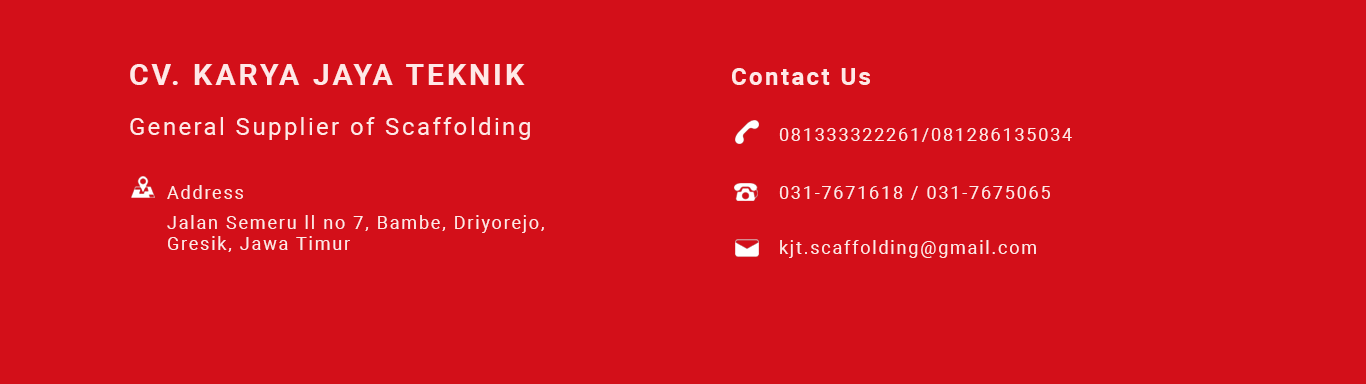
<style>
.page{position:relative;width:1366px;height:384px;background:#d30f19}
.page>*{position:absolute;margin:0}
.t1{font:30px "Roboto-Bold";letter-spacing:0.1em;color:#ffe8e7}
.t2{font:24px "Roboto-Bold";letter-spacing:0.1em;color:#ffe8e7}
.t3{font:24px "Roboto-Regular";letter-spacing:0.1em;color:#ffe8e7}
.t4{font:18px "Roboto-Regular";letter-spacing:0.1em;color:#ffe8e7}
</style>
<div class="page">
<p class="t1" style="left:130px;top:64px;width:395px;height:21px">CV. KARYA JAYA TEKNIK</p>
<p class="t2" style="left:732px;top:68px;width:138px;height:17px">Contact Us</p>
<p class="t3" style="left:130px;top:117px;width:400px;height:23px">General Supplier of Scaffolding</p>
<p class="t4" style="left:779px;top:128px;width:293px;height:14px">081333322261/081286135034</p>
<p class="t4" style="left:167px;top:185px;width:76px;height:14px">Address</p>
<p class="t4" style="left:779px;top:186px;width:271px;height:14px">031-7671618 / 031-7675065</p>
<p class="t4" style="left:167px;top:215px;width:377px;height:37px">Jalan Semeru ll no 7, Bambe, Driyorejo, <br>Gresik, Jawa Timur</p>
<p class="t4" style="left:780px;top:240px;width:256px;height:18px">kjt.scaffolding@gmail.com</p>
</div>
